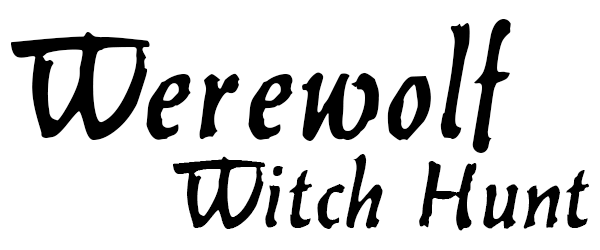
<style>
.page{position:relative;width:600px;height:250px;background:#ffffff}
.page>*{position:absolute;margin:0}
.t1{font:155.7px "Werewolf";color:#000000;scale:0.94 1}
.t2{font:103.8px "Werewolf";color:#000000;scale:0.94 1}
</style>
<div class="page">
<p class="t1" style="left:10px;top:19px;width:501px;height:134px">Werewolf</p>
<p class="t2" style="left:173px;top:154px;width:416px;height:77px">Witch Hunt</p>
</div>
